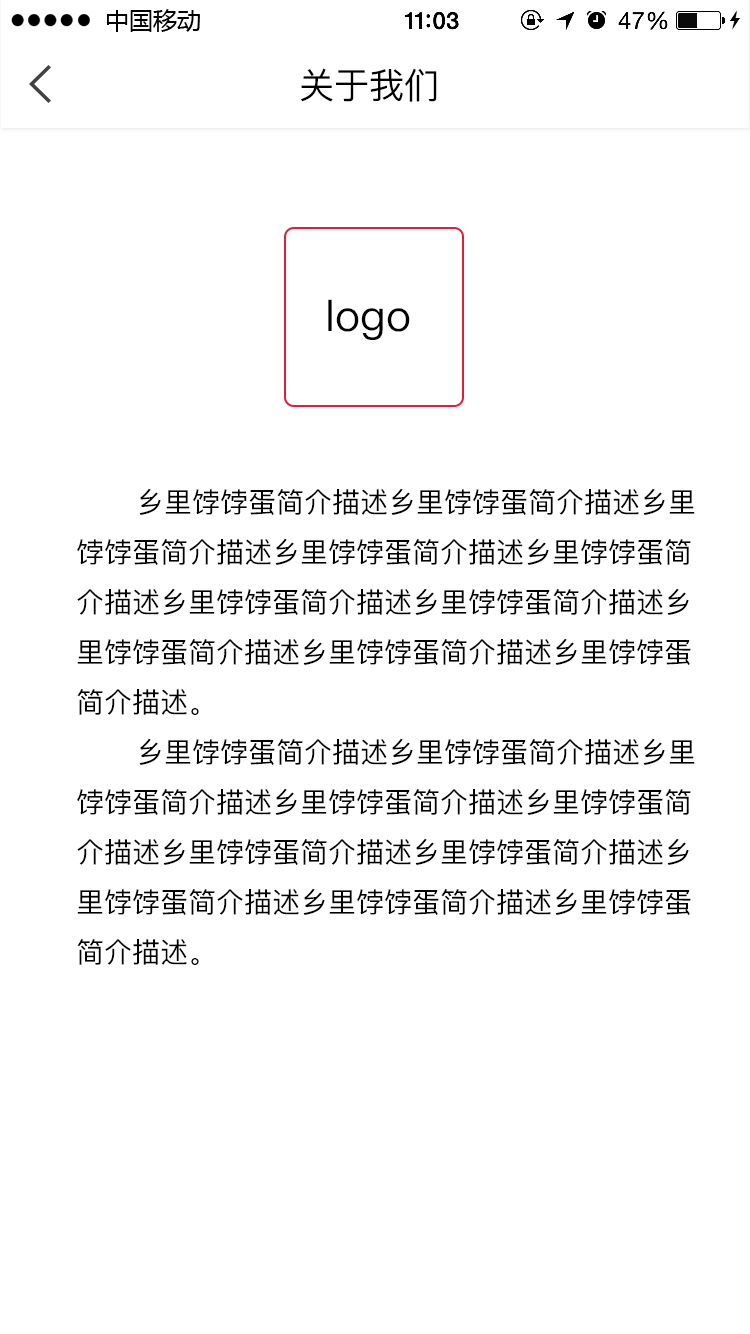
<style>
.page{position:relative;width:750px;height:1334px;background:#ffffff}
.page>*{position:absolute;margin:0}
.t1{font:35.7px "PingFang-SC-Medium";color:#000000}
.t2{font:42.8px "PingFang-SC-Medium";color:#000000}
.t3{font:28px/50px "PingFang-SC-Medium";color:#000000}
</style>
<div class="page">
<p class="t1" style="left:301px;top:68px;width:136px;height:34px">关于我们</p>
<p class="t2" style="left:328px;top:299px;width:82px;height:41px">logo</p>
<p class="t3" style="left:77px;top:488px;width:618px;height:477px">乡里饽饽蛋简介描述乡里饽饽蛋简介描述乡里饽饽蛋简介描述乡里饽饽蛋简介描述乡里饽饽蛋简介描述乡里饽饽蛋简介描述乡里饽饽蛋简介描述乡里饽饽蛋简介描述乡里饽饽蛋简介描述乡里饽饽蛋简介描述。<br>乡里饽饽蛋简介描述乡里饽饽蛋简介描述乡里饽饽蛋简介描述乡里饽饽蛋简介描述乡里饽饽蛋简介描述乡里饽饽蛋简介描述乡里饽饽蛋简介描述乡里饽饽蛋简介描述乡里饽饽蛋简介描述乡里饽饽蛋简介描述。</p>
</div>
